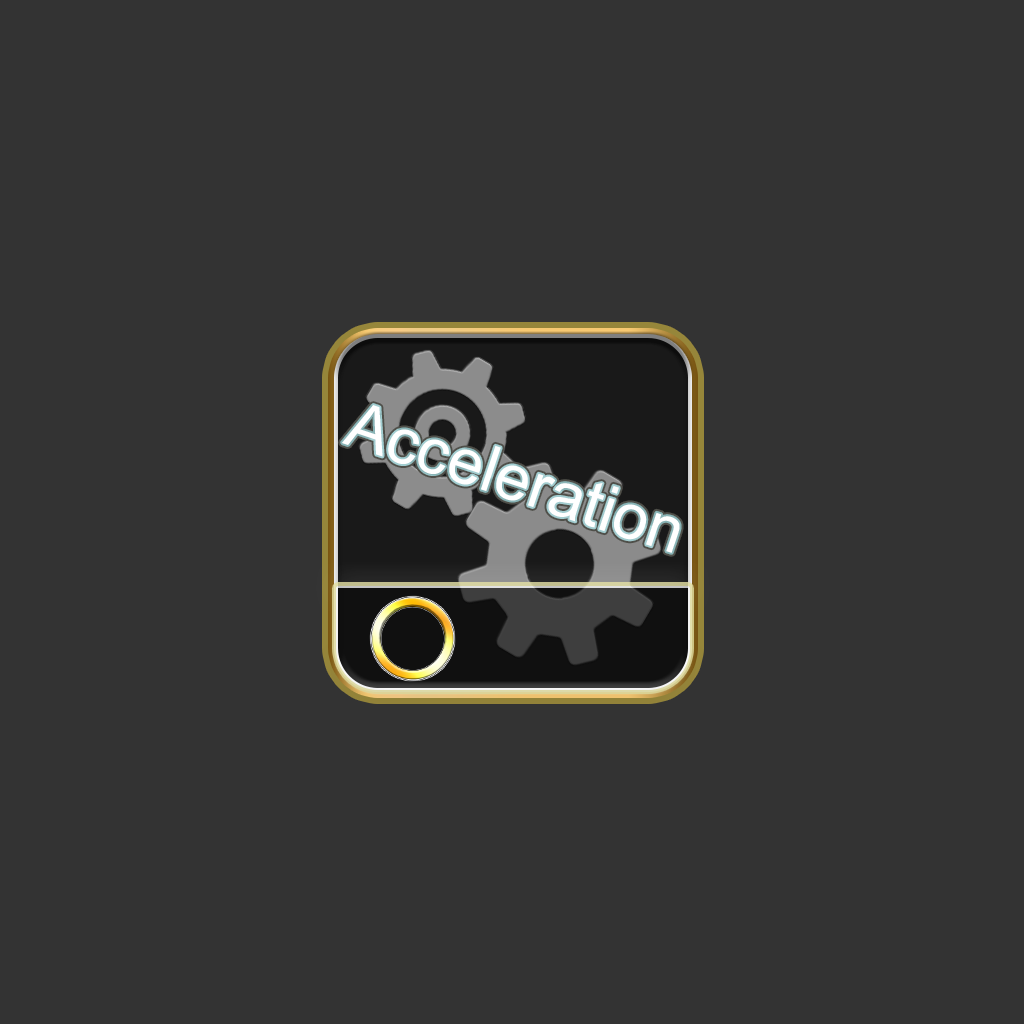
<style>
.page{position:relative;width:1024px;height:1024px;background:#333333}
.page>*{position:absolute;margin:0}
.t1{font:64px "ArialMT";color:#ffffff}
</style>
<div class="page">
<p class="t1" style="left:342px;top:405px;width:338px;height:148px;rotate:18deg">Acceleration</p>
</div>
